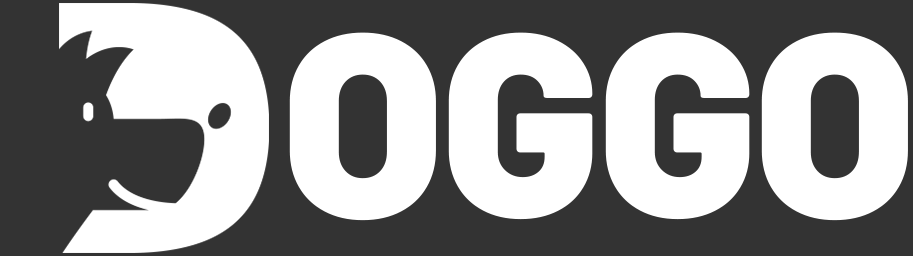
<style>
.page{position:relative;width:913px;height:256px;background:#333333}
.page>*{position:absolute;margin:0}
.t1{font:260.4px "Barlow-Black";letter-spacing:-0.01em;color:#ffffff;text-transform:uppercase}
</style>
<div class="page">
<p class="t1" style="left:289px;top:32px;width:619px;height:189px">oggo</p>
</div>
